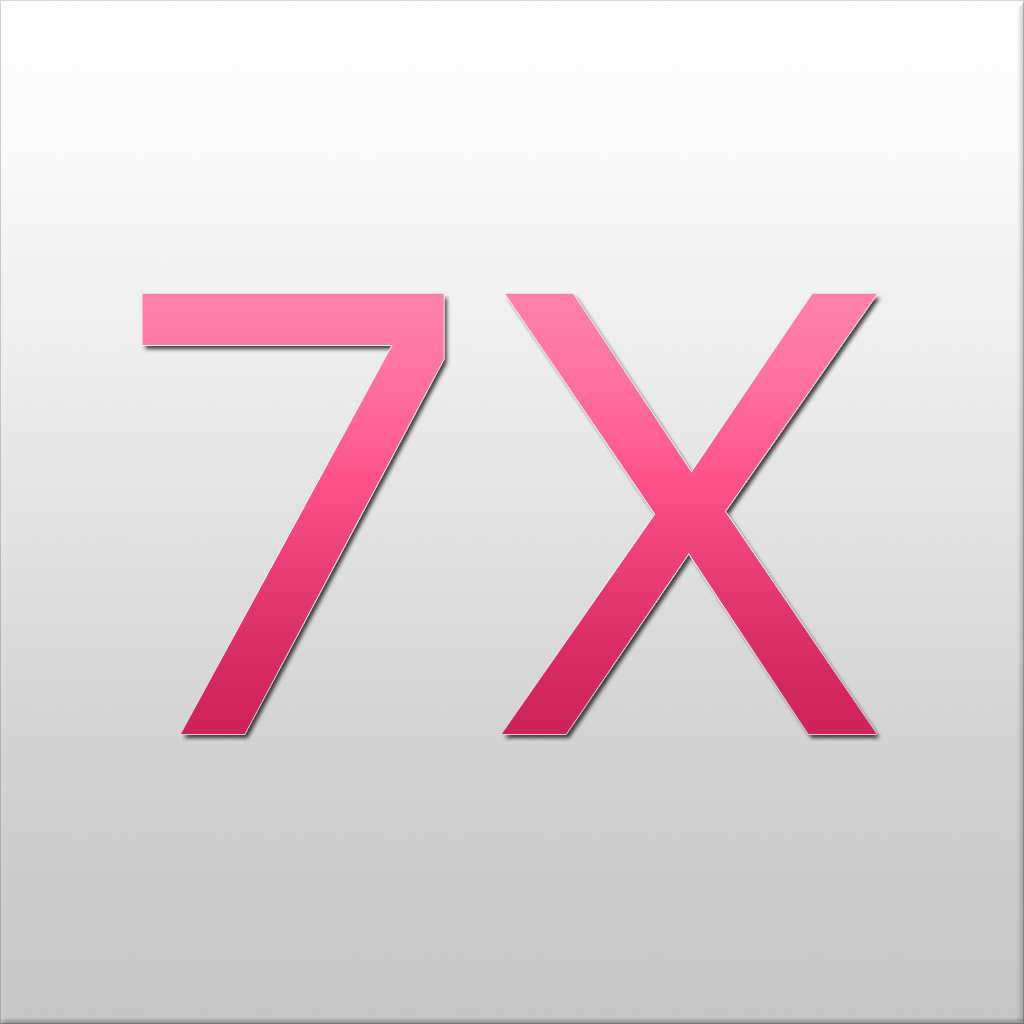
<style>
.page{position:relative;width:1024px;height:1024px}
.page>*{position:absolute;margin:0}
.t1{font:605.1px "Verdana"}
</style>
<div class="page">
<p class="t1" style="left:142px;top:293px;width:735px;height:441px">7X</p>
</div>
